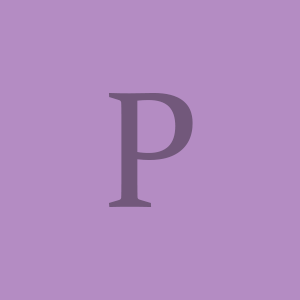
<style>
.page{position:relative;width:300px;height:300px;background:#b48cc3}
.page>*{position:absolute;margin:0}
.t1{font:166.7px "Constantia";color:#72587b}
</style>
<div class="page">
<p class="t1" style="left:108px;top:93px;width:85px;height:114px">P</p>
</div>
